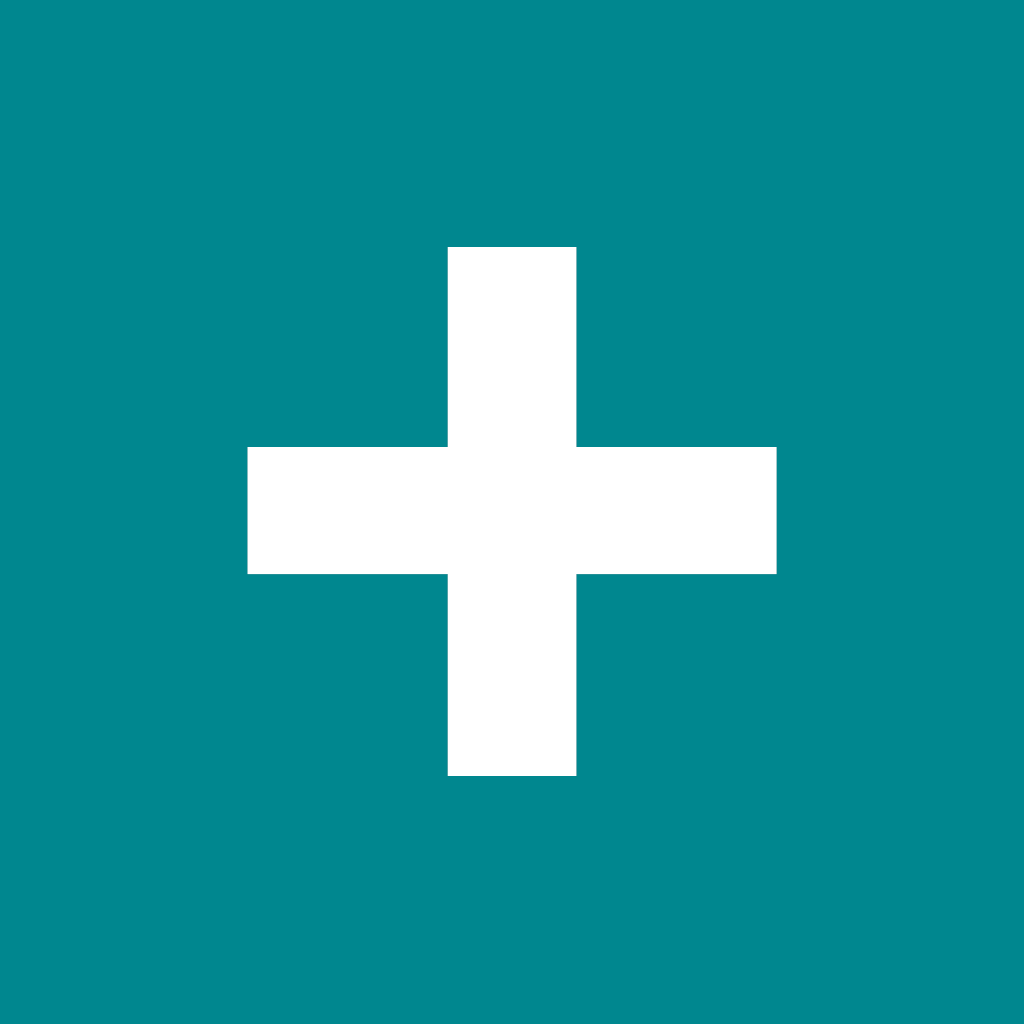
<style>
.page{position:relative;width:1024px;height:1024px;background:#00878f}
.page>*{position:absolute;margin:0}
.t1{font:1000px "Helvetica-Bold";color:#ffffff}
</style>
<div class="page">
<p class="t1" style="left:247px;top:247px;width:530px;height:529px">+</p>
</div>
